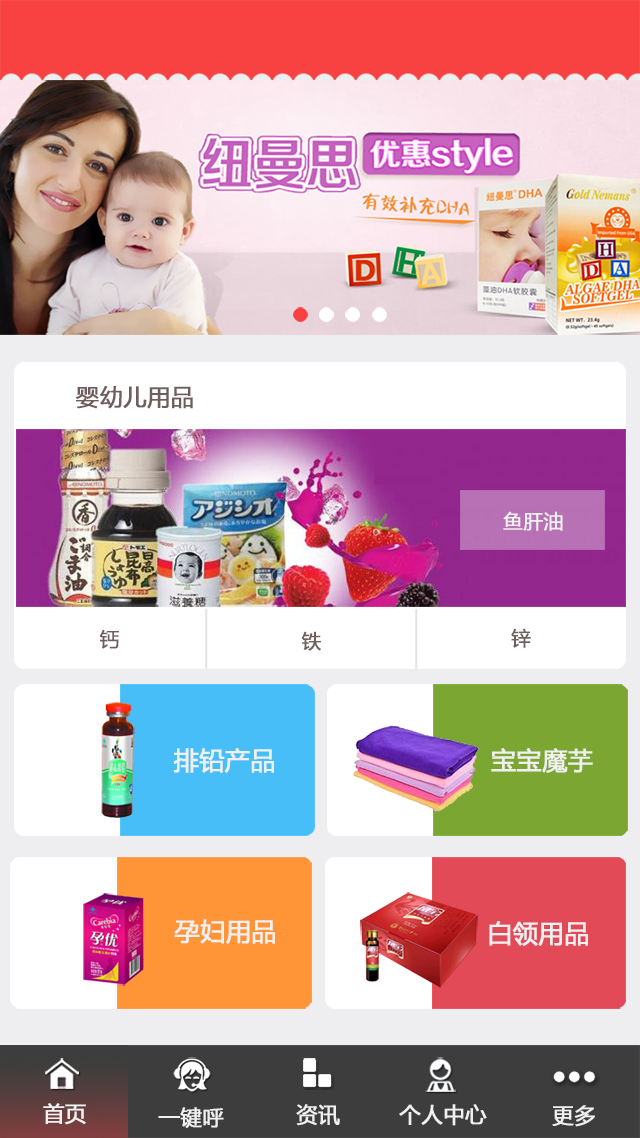
<style>
.page{position:relative;width:640px;height:1138px}
.page>*{position:absolute;margin:0}
.t1{font:23.1px "MicrosoftYaHei";color:#705d5d;font-weight:bold}
.t2{font:19.6px "MicrosoftYaHei";color:#f0f0f0;font-weight:bold}
.t3{font:19.6px "MicrosoftYaHei";color:#705d5d;font-weight:bold}
.t4{font:24.9px "MicrosoftYaHei";color:#f0f0f0;font-weight:bold}
.t5{font:21.3px "MicrosoftYaHei";color:#f0f0f0;font-weight:bold}
</style>
<div class="page">
<p class="t1" style="left:75px;top:386px;width:118px;height:23px">婴幼儿用品</p>
<p class="t2" style="left:503px;top:511px;width:60px;height:20px">鱼肝油</p>
<p class="t3" style="left:99px;top:629px;width:20px;height:20px">钙</p>
<p class="t3" style="left:511px;top:628px;width:20px;height:20px">锌</p>
<p class="t3" style="left:301px;top:631px;width:20px;height:20px">铁</p>
<p class="t4" style="left:173px;top:748px;width:101px;height:25px">排铅产品</p>
<p class="t4" style="left:491px;top:748px;width:102px;height:25px">宝宝魔芋</p>
<p class="t4" style="left:174px;top:919px;width:101px;height:25px">孕妇用品</p>
<p class="t4" style="left:489px;top:921px;width:99px;height:25px">白领用品</p>
<p class="t5" style="left:43px;top:1103px;width:43px;height:22px">首页</p>
<p class="t5" style="left:158px;top:1107px;width:66px;height:21px">一键呼</p>
<p class="t5" style="left:296px;top:1104px;width:44px;height:22px">资讯</p>
<p class="t5" style="left:399px;top:1104px;width:88px;height:22px">个人中心</p>
<p class="t5" style="left:552px;top:1105px;width:43px;height:22px">更多</p>
</div>
